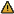
<style>
.page{position:relative;width:14px;height:14px;background:#ffffff}
.page>*{position:absolute;margin:0}
.t1{font:8.3px "MyriadPro-Regular";color:#000000}
</style>
<div class="page">
<p class="t1" style="left:7px;top:5px;width:2px;height:6px">!</p>
</div>
